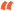
<style>
.page{position:relative;width:14px;height:11px;background:#ffffff}
.page>*{position:absolute;margin:0}
.t1{font:24px "ChunkFive-Roman";color:#f55d2d}
</style>
<div class="page">
<p class="t1" style="left:0px;top:0px;width:14px;height:11px">“</p>
</div>
